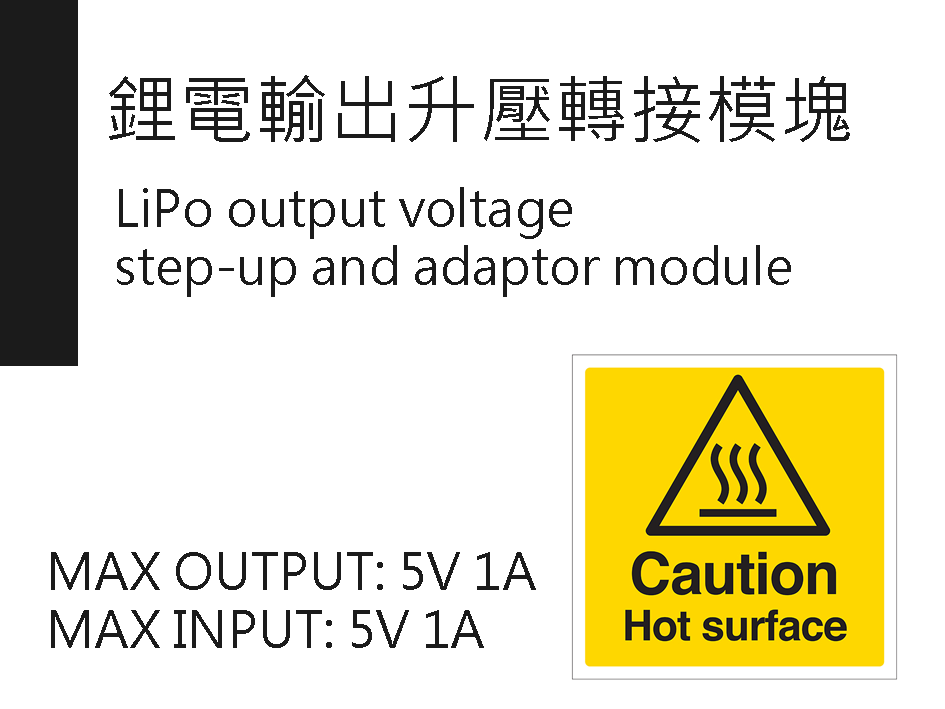
<style>
.page{position:relative;width:945px;height:709px;background:#ffffff}
.page>*{position:absolute;margin:0}
.t1{font:75px "MicrosoftJhengHeiRegular";color:#1b1b1b}
.t2{font:50px/58.3px "MicrosoftJhengHeiRegular";color:#1b1b1b}
</style>
<div class="page">
<p class="t1" style="left:109px;top:75px;width:741px;height:68px">鋰電輸出升壓轉接模塊</p>
<p class="t2" style="left:117px;top:187px;width:674px;height:110px">LiPo output voltage <br>step-up and adaptor module</p>
<p class="t2" style="left:51px;top:552px;width:485px;height:96px">MAX OUTPUT: 5V 1A<br>MAX INPUT: 5V 1A</p>
</div>
